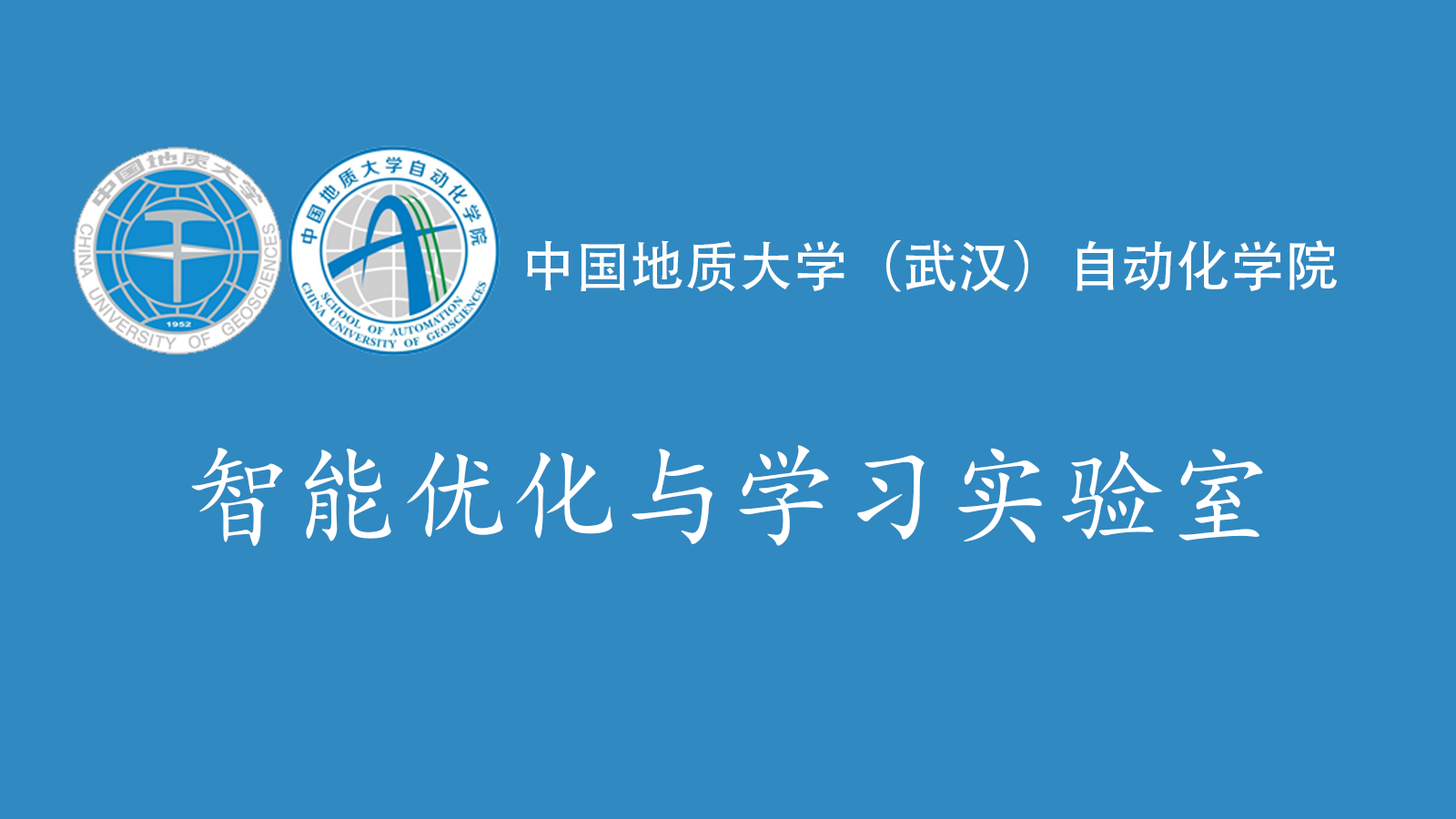
<style>
.page{position:relative;width:1456px;height:819px;background:#3089c1}
.page>*{position:absolute;margin:0}
.t1{font:54.6px "AdobeHeitiStd-Regular";color:#ffffff}
.t2{font:109.2px "KaiTi";color:#ffffff}
</style>
<div class="page">
<p class="t1" style="left:527px;top:239px;width:810px;height:53px">中国地质大学（武汉）自动化学院</p>
<p class="t2" style="left:191px;top:445px;width:1072px;height:101px">智能优化与学习实验室</p>
</div>
